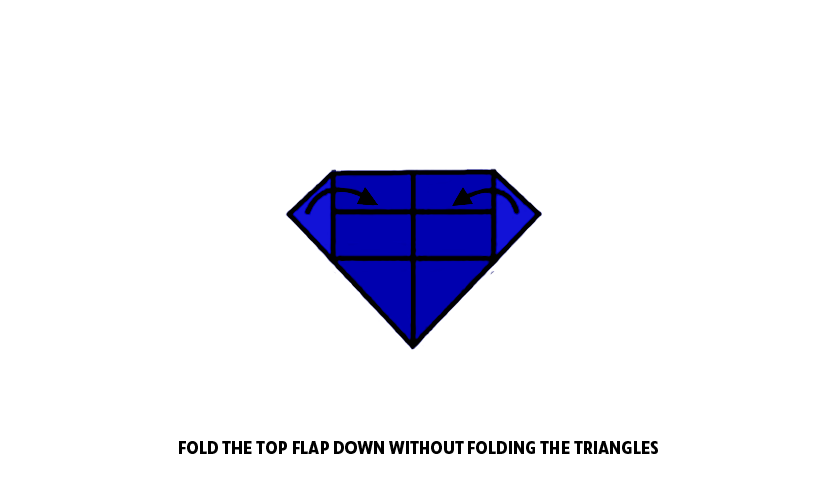
<style>
.page{position:relative;width:830px;height:500px;background:#ffffff}
.page>*{position:absolute;margin:0}
.t1{font:18px "RuckSack-Bold";color:#000000}
</style>
<div class="page">
<p class="t1" style="left:179px;top:441px;width:479px;height:13px">FOLD THE TOP FLAP DOWN WITHOUT FOLDING THE TRIANGLES</p>
</div>
